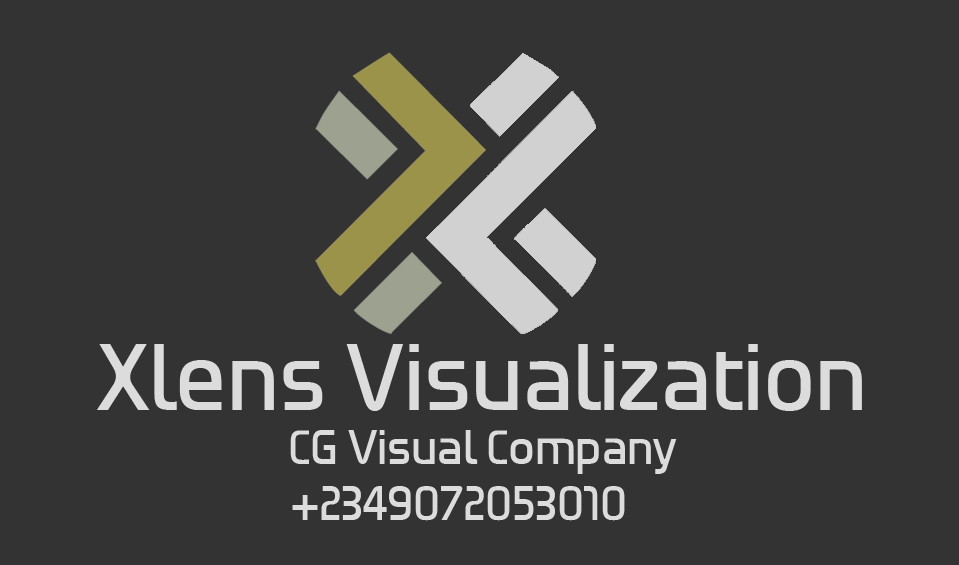
<style>
.page{position:relative;width:959px;height:565px;background:#333333}
.page>*{position:absolute;margin:0}
.t1{font:100px "HGBGroteskMedW00-Regular";color:#dcdcdc}
.t2{font:50.6px "HGBGroteskMedW00-Regular";color:#dcdcdc}
</style>
<div class="page">
<p class="t1" style="left:97px;top:344px;width:765px;height:67px">Xlens Visualization</p>
<p class="t2" style="left:290px;top:430px;width:387px;height:44px">CG Visual Company</p>
<p class="t2" style="left:292px;top:486px;width:333px;height:35px">+2349072053010</p>
</div>
